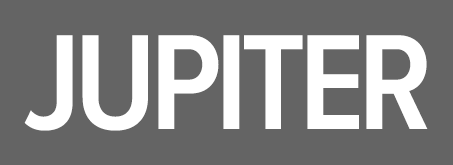
<style>
.page{position:relative;width:453px;height:165px;background:#646464}
.page>*{position:absolute;margin:0}
.t1{font:140px "ProximaNovaCond-Semibold";letter-spacing:-0.05em;color:#ffffff;text-transform:uppercase}
</style>
<div class="page">
<p class="t1" style="left:24px;top:35px;width:404px;height:96px">Jupiter</p>
</div>
